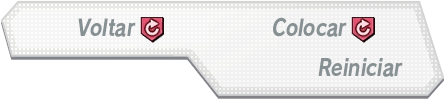
<style>
.page{position:relative;width:446px;height:100px;background:#ffffff}
.page>*{position:absolute;margin:0}
.t1{font:22.7px "RodinNTLGPro-B";color:#879092;font-style:italic;scale:0.83 1}
</style>
<div class="page">
<p class="t1" style="left:273px;top:17px;width:74px;height:20px">Colocar</p>
<p class="t1" style="left:78px;top:18px;width:58px;height:19px">Voltar</p>
<p class="t1" style="left:318px;top:58px;width:85px;height:19px">Reiniciar</p>
</div>
